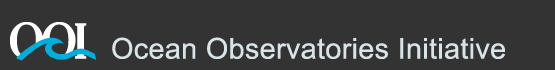
<style>
.page{position:relative;width:555px;height:70px;background:#333333}
.page>*{position:absolute;margin:0}
.t1{font:28.7px "ArialMT";letter-spacing:0.01em;color:#d9e4e8}
</style>
<div class="page">
<p class="t1" style="left:112px;top:37px;width:393px;height:22px">Ocean Observatories Initiative</p>
</div>
